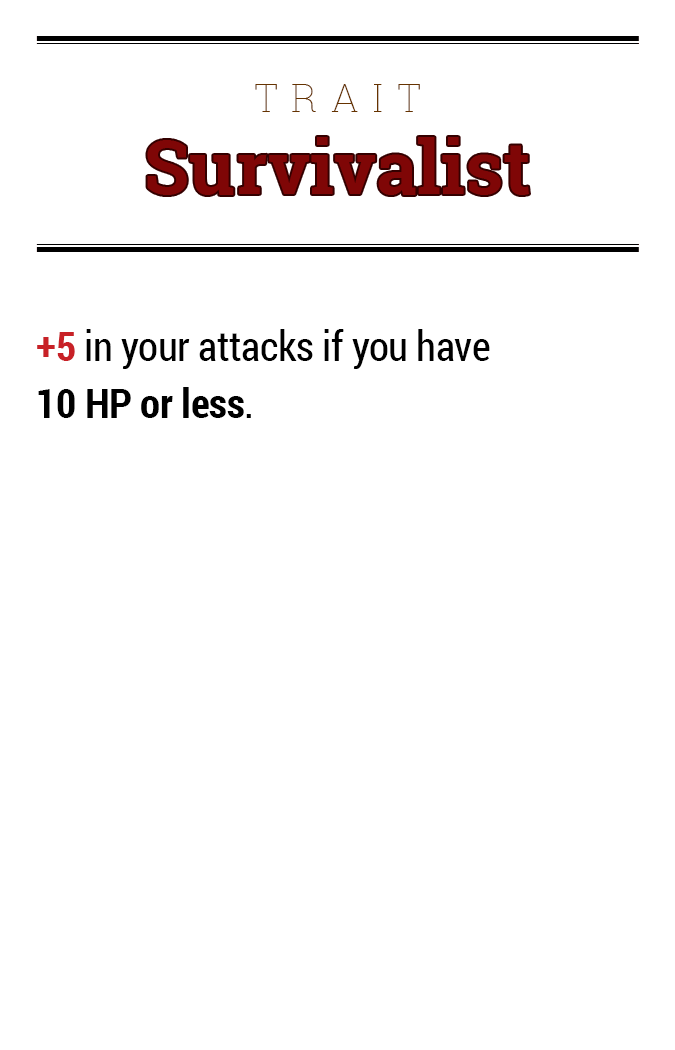
<style>
.page{position:relative;width:675px;height:1050px;background:#ffffff}
.page>*{position:absolute;margin:0}
.t1{font:39.2px "RobotoSlab-Thin";letter-spacing:0.34em;color:#663300}
.t2{font:74.5px "RobotoSlab-Bold";color:#7f0606}
.t3{font:41.1px/57.1px "RobotoCondensed-Regular";letter-spacing:-0.01em;color:#000000}
.t4{font:41.1px/57.1px "RobotoCondensed-Bold";letter-spacing:-0.01em;color:#c82127}
.t5{font:41.1px/57.1px "RobotoCondensed-Bold";letter-spacing:-0.01em;color:#000000}
</style>
<div class="page">
<p class="t1" style="left:255px;top:84px;width:165px;height:28px">TRAIT</p>
<p class="t2" style="left:147px;top:137px;width:382px;height:58px">Survivalist</p>
<p class="t3" style="left:37px;top:329px;width:453px;height:89px"><span class="t4">+5</span> in your attacks if you have<br><span class="t5">10 HP or less</span>.</p>
</div>
